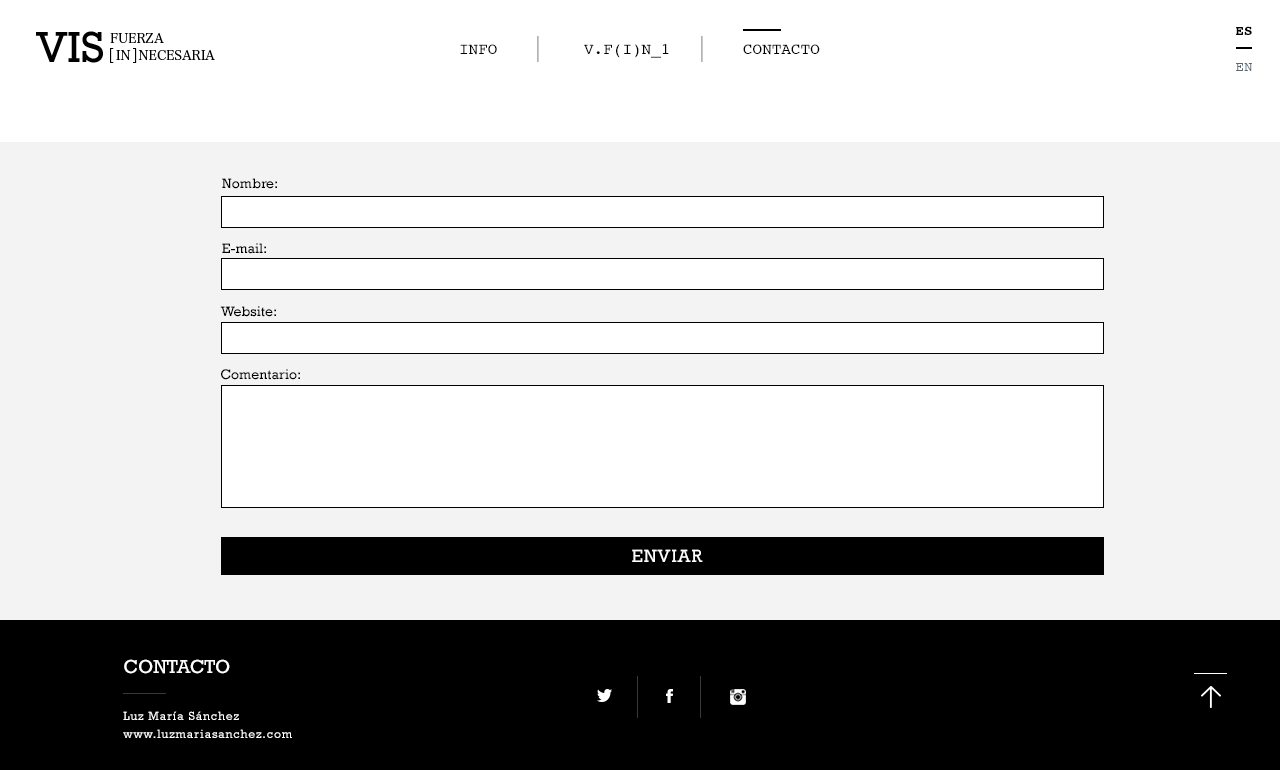
<style>
.page{position:relative;width:1280px;height:770px;background:#f3f3f3}
.page>*{position:absolute;margin:0}
.t1{font:14px "Courier-Bold";color:#000000}
.t2{font:16px "Courier";color:#000000}
.t3{font:14px "Courier";color:#5a6771}
.t4{font:14px "Rockwell";color:#000000}
.t5{font:18px "Rockwell";letter-spacing:0.05em;color:#ffffff}
.t6{font:18.9px "Rockwell";color:#ffffff;text-transform:uppercase}
.t7{font:12px "Rockwell";letter-spacing:0.075em;color:#ffffff}
</style>
<div class="page">
<p class="t1" style="left:1236px;top:26px;width:16px;height:9px">ES</p>
<p class="t2" style="left:460px;top:44px;width:37px;height:11px">INFO</p>
<p class="t2" style="left:584px;top:44px;width:85px;height:14px">V.F(I)N_1</p>
<p class="t2" style="left:743px;top:44px;width:77px;height:11px">CONTACTO</p>
<p class="t3" style="left:1236px;top:63px;width:16px;height:8px">EN</p>
<p class="t4" style="left:222px;top:178px;width:55px;height:11px">Nombre:</p>
<p class="t4" style="left:222px;top:243px;width:44px;height:11px">E-mail:</p>
<p class="t4" style="left:220px;top:306px;width:56px;height:11px">Website:</p>
<p class="t4" style="left:221px;top:369px;width:79px;height:11px">Comentario:</p>
<p class="t5" style="left:632px;top:549px;width:71px;height:13px">ENVIAR</p>
<p class="t6" style="left:124px;top:659px;width:106px;height:15px">CONTACTO</p>
<p class="t7" style="left:123px;top:711px;width:116px;height:9px">Luz María Sánchez</p>
<p class="t7" style="left:123px;top:729px;width:169px;height:9px">www.luzmariasanchez.com</p>
</div>
